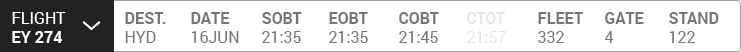
<style>
.page{position:relative;width:741px;height:52px;background:#ffffff}
.page>*{position:absolute;margin:0}
.t1{font:16px "Roboto-Regular";color:#ffffff;text-transform:uppercase}
.t2{font:16px "Roboto-Bold";color:#ffffff;text-transform:uppercase}
.t3{font:16px "Roboto-Bold";color:#767676;text-transform:uppercase}
.t4{font:16px "Roboto-Regular";color:#767676;text-transform:uppercase}
.t5{font:16px "Roboto-Regular";color:#e6e6e6;text-transform:uppercase}
.t6{font:16px "Roboto-Bold";color:#e6e6e6;text-transform:uppercase}
</style>
<div class="page">
<p class="t1" style="left:12px;top:12px;width:54px;height:31px">Flight<br><span class="t2">EY 274</span></p>
<p class="t3" style="left:125px;top:12px;width:41px;height:31px">DESt.<br><span class="t4">HYD</span></p>
<p class="t4" style="left:191px;top:12px;width:48px;height:31px"><span class="t3">Date<br></span>16jun</p>
<p class="t4" style="left:262px;top:12px;width:40px;height:31px"><span class="t3">SOBT<br></span>21:35</p>
<p class="t4" style="left:329px;top:12px;width:39px;height:31px"><span class="t3">EOBT<br></span>21:35</p>
<p class="t4" style="left:399px;top:12px;width:40px;height:31px"><span class="t3">COBT<br></span>21:45</p>
<p class="t5" style="left:467px;top:12px;width:39px;height:31px"><span class="t6">CTOT<br></span>21:57</p>
<p class="t3" style="left:538px;top:12px;width:45px;height:31px">FLEET<br><span class="t4">332</span></p>
<p class="t3" style="left:604px;top:12px;width:40px;height:31px">gate<br><span class="t4">4</span></p>
<p class="t3" style="left:669px;top:12px;width:50px;height:31px">stand<br><span class="t4">122</span></p>
</div>
